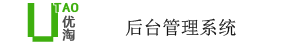
<style>
.page{position:relative;width:303px;height:43px;background:#ffffff}
.page>*{position:absolute;margin:0}
.t1{font:50.7px "Small Fonts";color:#3eaf0e;text-transform:uppercase;font-weight:bold;scale:1.19 1}
.t2{font:12.9px "SimHei";color:#3eaf0e;text-transform:uppercase;font-weight:bold;scale:1.24 1}
.t3{font:12.5px/15.4px "MicrosoftYaHei";letter-spacing:0.01em;color:#4c4c4c;text-transform:uppercase;font-weight:bold}
.t4{font:18.6px "SimSun";color:#101010;text-transform:uppercase}
</style>
<div class="page">
<p class="t1" style="left:27px;top:3px;width:31px;height:39px">u</p>
<p class="t2" style="left:54px;top:2px;width:25px;height:11px">tao</p>
<p class="t3" style="left:62px;top:15px;width:14px;height:26px">优淘</p>
<p class="t4" style="left:125px;top:18px;width:111px;height:18px">后台管理系统</p>
</div>
